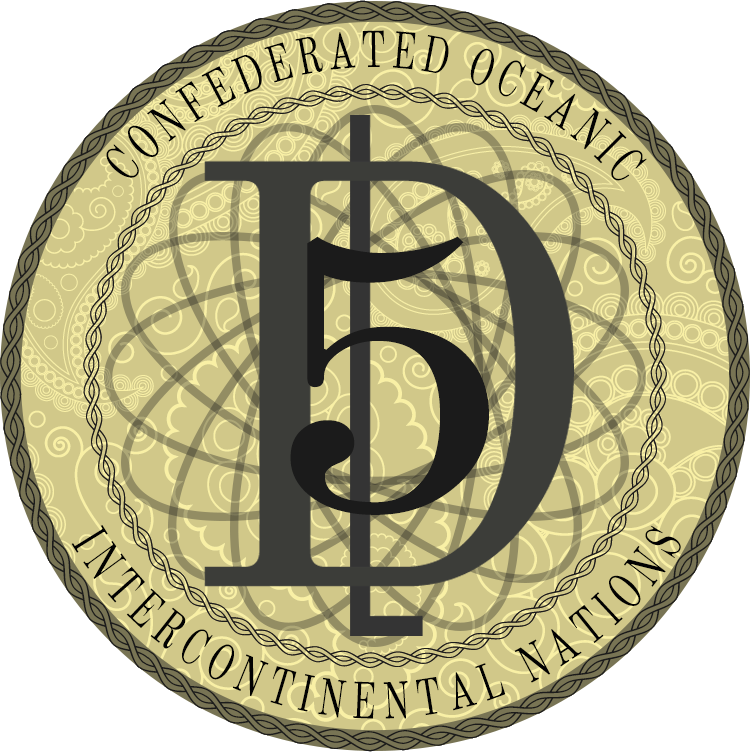
<style>
.page{position:relative;width:750px;height:752px;background:#d1c889}
.page>*{position:absolute;margin:0}
.t1{font:50.9px/33.3px "OldStandardTT-Regular";letter-spacing:0.124em;color:#020202;scale:0.7 1}
.t2{font:388px "OldStandardTT-Regular";letter-spacing:-0.016em;color:#1b1b1b;scale:1.19 1}
.t3{font:50.9px "OldStandardTT-Regular";letter-spacing:0.124em;color:#020202;scale:0.7 1}
</style>
<div class="page">
<p class="t1" style="left:106px;top:30px;width:541px;height:151px">CONFEDERATED OCEANIC</p>
<p class="t2" style="left:290px;top:236px;width:199px;height:279px">5</p>
<p class="t3" style="left:71px;top:525px;width:610px;height:194px;rotate:3deg">INTERCONTINENTAL NATIONS</p>
</div>
